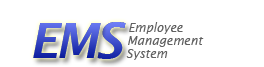
<style>
.page{position:relative;width:264px;height:67px;background:#ffffff}
.page>*{position:absolute;margin:0}
.t1{font:12px "LucidaSans-Italic";color:#606060}
</style>
<div class="page">
<p class="t1" style="left:129px;top:22px;width:54px;height:12px">Employee</p>
<p class="t1" style="left:128px;top:36px;width:76px;height:11px">Management</p>
<p class="t1" style="left:126px;top:49px;width:42px;height:11px">System</p>
</div>
